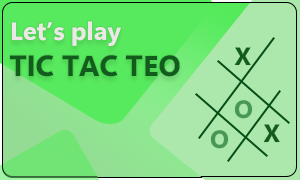
<style>
.page{position:relative;width:300px;height:180px;background:#ace8ac}
.page>*{position:absolute;margin:0}
.t1{font:25px "SegoeUIVariable-BoldText";color:#ece8e8}
.t2{font:25px "SegoeUIVariable-BoldText";color:#125c1e}
.t3{font:29.2px "SegoeUIVariable-BoldText";color:#125c1e}
.t4{font:25px "SegoeUIVariable-BoldText";color:#489855}
</style>
<div class="page">
<p class="t1" style="left:11px;top:21px;width:110px;height:26px">Let’s play</p>
<p class="t2" style="left:234px;top:47px;width:17px;height:19px">X</p>
<p class="t3" style="left:10px;top:55px;width:170px;height:22px">TIC TAC TEO</p>
<p class="t4" style="left:234px;top:100px;width:19px;height:19px">O</p>
<p class="t2" style="left:263px;top:124px;width:17px;height:19px">X</p>
<p class="t4" style="left:210px;top:130px;width:19px;height:19px">O</p>
</div>
